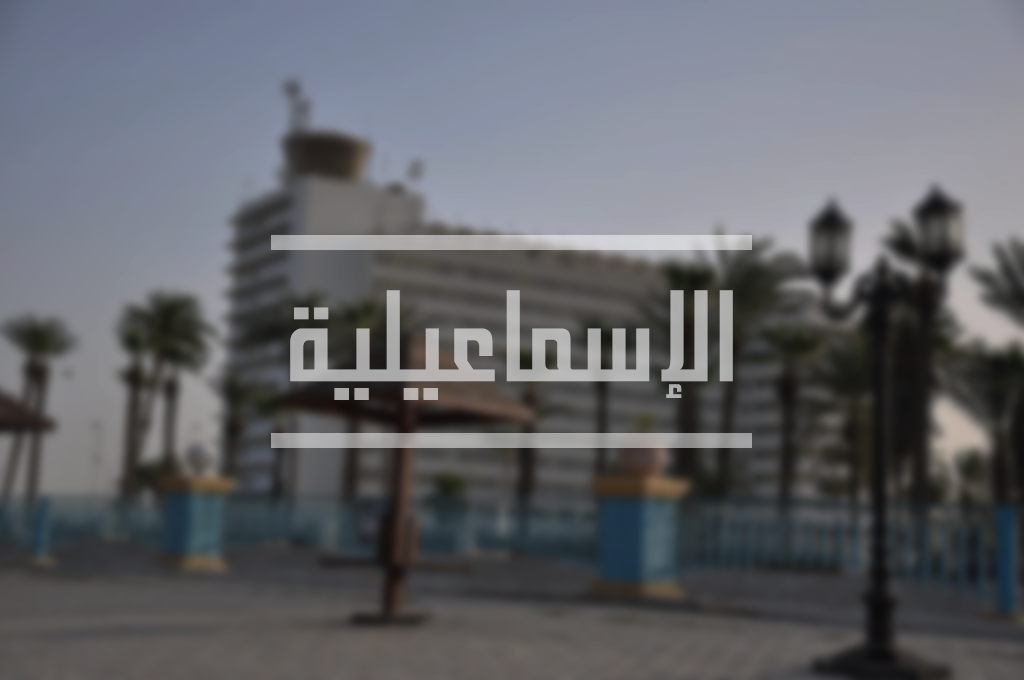
<style>
.page{position:relative;width:1024px;height:680px}
.page>*{position:absolute;margin:0}
.t1{font:128px "SC_SHARJAH";color:#b0b0af}
</style>
<div class="page">
<p class="t1" style="left:290px;top:290px;width:443px;height:110px">الإسماعيلية</p>
</div>
